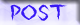
<style>
.page{position:relative;width:80px;height:25px}
.page>*{position:absolute;margin:0}
.t1{font:26px "thenight";letter-spacing:-0.025em;color:#3718f5;scale:1.08 1}
</style>
<div class="page">
<p class="t1" style="left:10px;top:4px;width:57px;height:17px">post</p>
</div>
